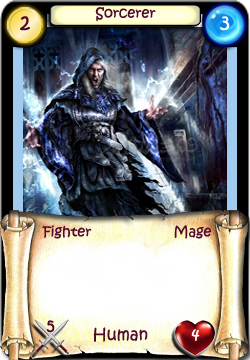
<style>
.page{position:relative;width:250px;height:360px}
.page>*{position:absolute;margin:0}
.t1{font:20px "KristenITC-Regular";color:#51092d}
.t2{font:14px "KristenITC-Regular";color:#51092d}
.t3{font:20px "KristenITC-Regular";color:#ffffff}
.t4{font:16px "KristenITC-Regular";color:#51092d}
.t5{font:16px "KristenITC-Regular";color:#fefefe}
</style>
<div class="page">
<p class="t1" style="left:20px;top:16px;width:10px;height:15px">2</p>
<p class="t2" style="left:95px;top:7px;width:61px;height:15px">Sorcerer</p>
<p class="t3" style="left:220px;top:16px;width:10px;height:15px">3</p>
<p class="t2" style="left:42px;top:225px;width:50px;height:14px">Fighter</p>
<p class="t2" style="left:174px;top:225px;width:38px;height:14px">Mage</p>
<p class="t4" style="left:46px;top:320px;width:9px;height:13px">5</p>
<p class="t4" style="left:93px;top:327px;width:55px;height:15px">Human</p>
<p class="t5" style="left:191px;top:329px;width:9px;height:12px">4</p>
</div>
